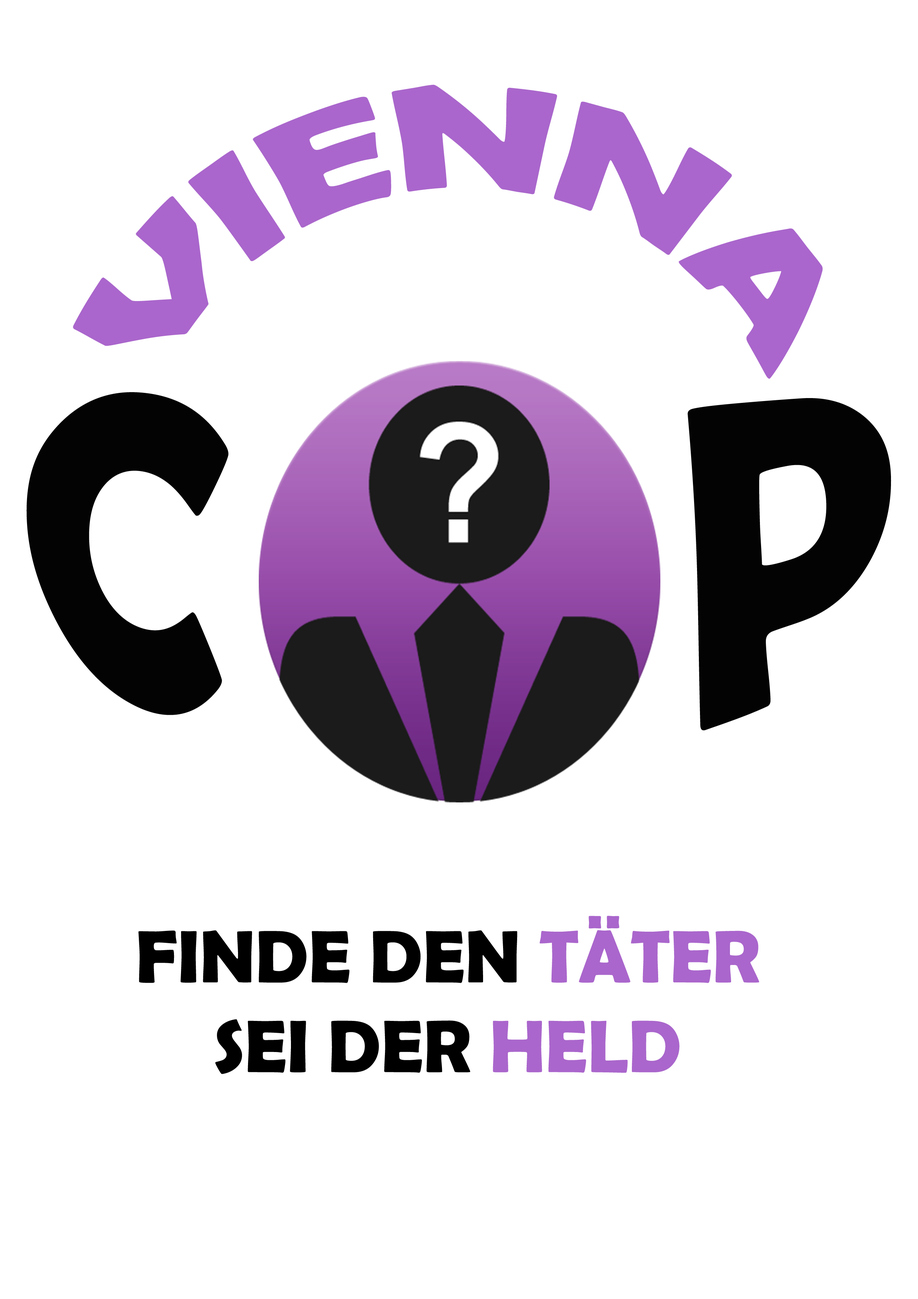
<style>
.page{position:relative;width:918px;height:1299px;background:#ffffff}
.page>*{position:absolute;margin:0}
.t1{font:149.5px "BerlinSansFBDemi-Bold";color:#aa66cc}
.t2{font:348.9px "BerlinSansFBDemi-Bold";color:#030303}
.t3{font:74.8px "BerlinSansFBDemi-Bold";color:#000000}
.t4{font:74.8px "BerlinSansFBDemi-Bold";color:#aa66cc}
</style>
<div class="page">
<p class="t1" style="left:73px;top:84px;width:750px;height:295px">VIENNA</p>
<p class="t2" style="left:26px;top:392px;width:865px;height:338px">C     P</p>
<p class="t3" style="left:138px;top:916px;width:621px;height:158px;text-align:center">FINDE DEN <span class="t4">TÄTER<br></span>SEI DER<span class="t4"> HELD</span></p>
</div>
